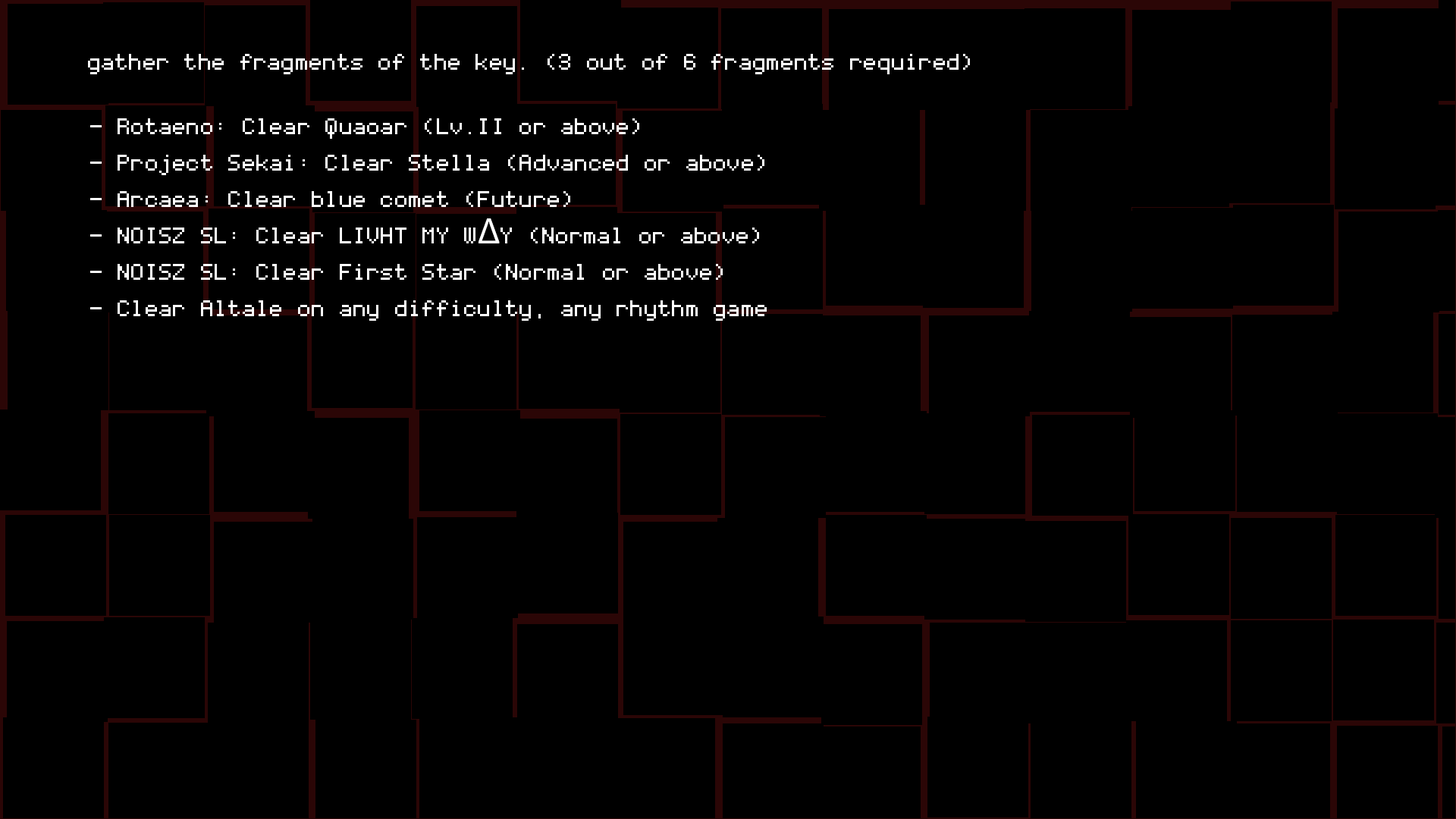
<style>
.page{position:relative;width:1456px;height:819px;background:#000000}
.page>*{position:absolute;margin:0}
.t1{font:36.4px "Coder's-Crux";color:#ffffff}
.t2{font:36.4px/36.4px "Coder's-Crux";color:#ffffff}
.t3{font:36.4px/36.4px "MyriadPro-Regular";color:#ffffff}
</style>
<div class="page">
<p class="t1" style="left:88px;top:54px;width:882px;height:20px">gather the fragments of the key. (3 out of 6 fragments required)</p>
<p class="t2" style="left:90px;top:118px;width:677px;height:203px">- Rotaeno: Clear Quaoar (Lv.II or above)<br>- Project Sekai: Clear Stella (Advanced or above)<br>- Arcaea: Clear blue comet (Future)<br>- NOISZ SL: Clear LIVHT MY W<span class="t3">Δ</span>Y (Normal or above)<br>- NOISZ SL: Clear First Star (Normal or above)<br>- Clear Altale on any difficulty, any rhythm game</p>
</div>
